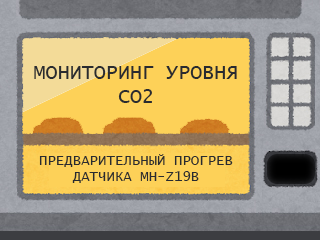
<style>
.page{position:relative;width:320px;height:240px;background:#fdd158}
.page>*{position:absolute;margin:0}
.t1{font:20px "LucidaConsole";color:#292b30;text-transform:uppercase}
.t2{font:14px "LucidaConsole";color:#292b30;text-transform:uppercase}
</style>
<div class="page">
<p class="t1" style="left:34px;top:66px;width:203px;height:37px;text-align:center">мониторинг уровня со2</p>
<p class="t2" style="left:39px;top:154px;width:194px;height:29px;text-align:center">предварительный прогрев<br>датчика MH-Z19B</p>
</div>
